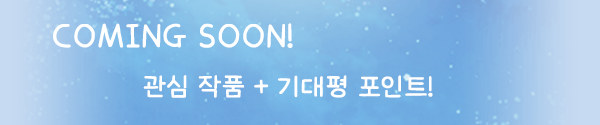
<style>
.page{position:relative;width:600px;height:125px}
.page>*{position:absolute;margin:0}
.t1{font:37.1px "omyu_pretty";color:#ffffff;font-weight:bold}
.t2{font:30.9px "omyu_pretty";color:#ffffff;font-weight:bold}
</style>
<div class="page">
<p class="t1" style="left:53px;top:23px;width:240px;height:25px">COMING SOON!</p>
<p class="t2" style="left:143px;top:75px;width:290px;height:23px">관심 작품 + 기대평 포인트!</p>
</div>
